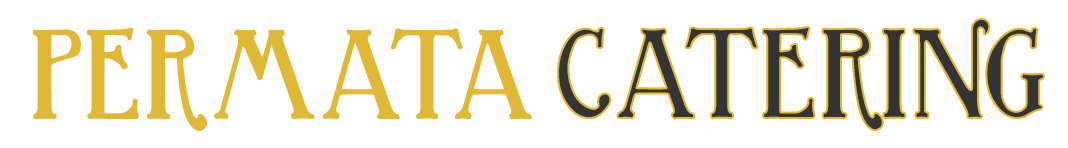
<style>
.page{position:relative;width:1068px;height:148px;background:#ffffff}
.page>*{position:absolute;margin:0}
.t1{font:104.7px "Birmingham";color:#e1b736}
.t2{font:104.7px "Birmingham";color:#343434}
</style>
<div class="page">
<p class="t1" style="left:34px;top:28px;width:497px;height:102px">PERMATA</p>
<p class="t2" style="left:559px;top:19px;width:485px;height:111px">CATERING</p>
</div>
